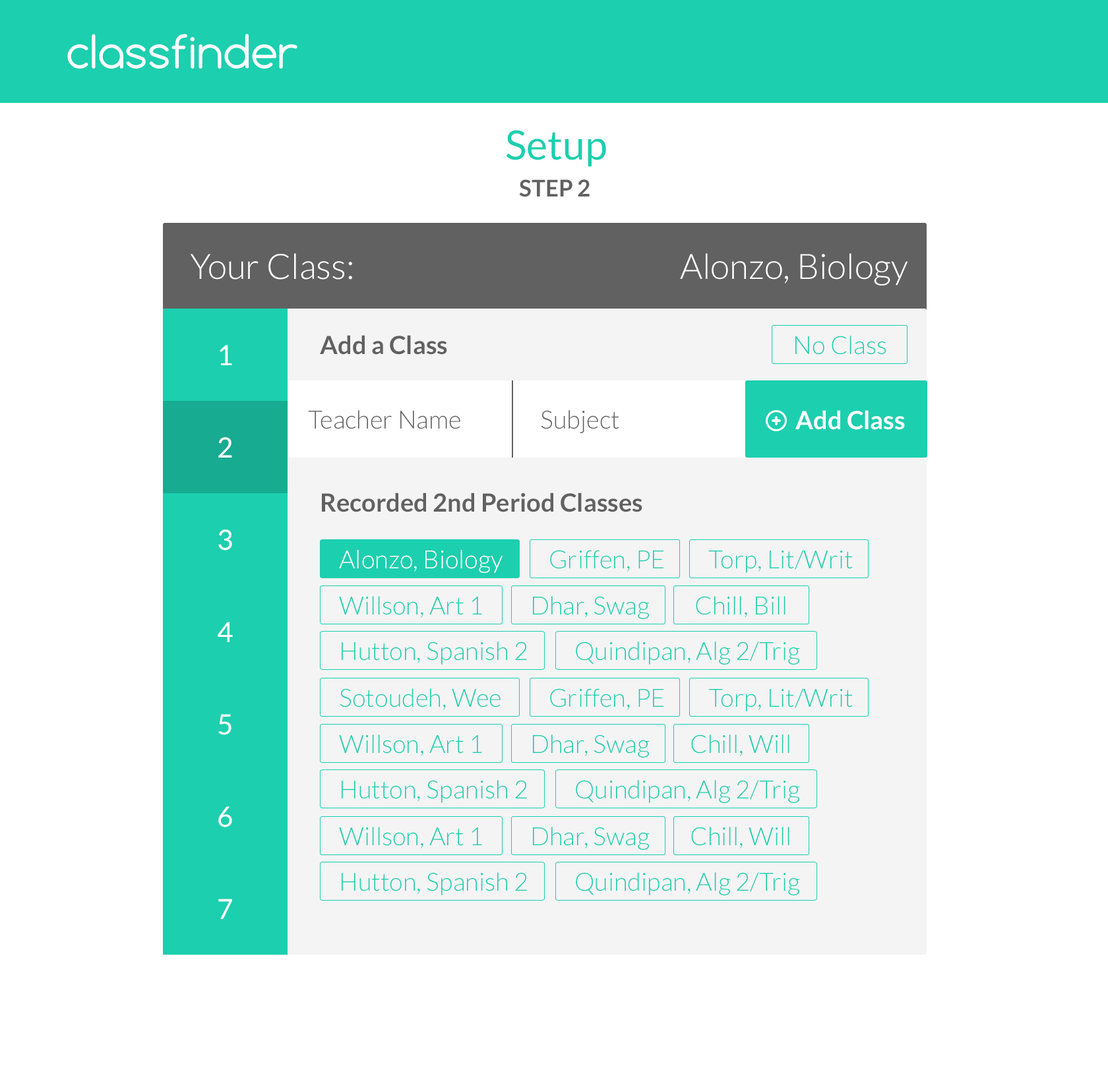
<style>
.page{position:relative;width:1108px;height:1076px;background:#ffffff}
.page>*{position:absolute;margin:0}
.t1{font:40.2px "Lato-Regular";color:#1ccfaf}
.t2{font:23.1px "Lato-Bold";color:#616161}
.t3{font:35px "Lato-Light";color:#ffffff}
.t4{font:25.1px "Lato-Bold";color:#616161}
.t5{font:25.1px "Lato-Light";color:#1ccfaf}
.t6{font:27.7px "Lato-Regular";color:#ffffff}
.t7{font:25.1px "Lato-Light";color:#616161}
.t8{font:25.1px "Lato-Bold";color:#ffffff}
.t9{font:25.1px "Lato-Light";color:#ffffff}
</style>
<div class="page">
<p class="t1" style="left:506px;top:130px;width:100px;height:37px">Setup</p>
<p class="t2" style="left:519px;top:179px;width:71px;height:18px">STEP 2</p>
<p class="t3" style="left:191px;top:253px;width:161px;height:27px">Your Class:</p>
<p class="t3" style="left:680px;top:253px;width:228px;height:33px">Alonzo, Biology</p>
<p class="t4" style="left:320px;top:335px;width:127px;height:20px">Add a Class</p>
<p class="t5" style="left:795px;top:336px;width:91px;height:19px">No Class</p>
<p class="t6" style="left:220px;top:345px;width:12px;height:20px">1</p>
<p class="t7" style="left:308px;top:410px;width:152px;height:19px">Teacher Name</p>
<p class="t7" style="left:541px;top:410px;width:78px;height:23px">Subject</p>
<p class="t8" style="left:795px;top:410px;width:110px;height:20px">Add Class</p>
<p class="t6" style="left:218px;top:437px;width:14px;height:21px">2</p>
<p class="t4" style="left:322px;top:493px;width:320px;height:19px">Recorded 2nd Period Classes</p>
<p class="t6" style="left:218px;top:530px;width:14px;height:21px">3</p>
<p class="t9" style="left:339px;top:550px;width:164px;height:23px">Alonzo, Biology</p>
<p class="t5" style="left:550px;top:550px;width:113px;height:22px">Griffen, PE</p>
<p class="t5" style="left:708px;top:550px;width:145px;height:23px">Torp, Lit/Writ</p>
<p class="t5" style="left:339px;top:596px;width:143px;height:22px">Willson, Art 1</p>
<p class="t5" style="left:533px;top:596px;width:117px;height:23px">Dhar, Swag</p>
<p class="t5" style="left:696px;top:596px;width:89px;height:22px">Chill, Bill</p>
<p class="t6" style="left:217px;top:622px;width:16px;height:20px">4</p>
<p class="t5" style="left:342px;top:642px;width:185px;height:23px">Hutton, Spanish 2</p>
<p class="t5" style="left:576px;top:642px;width:224px;height:23px">Quindipan, Alg 2/Trig</p>
<p class="t5" style="left:340px;top:688px;width:161px;height:22px">Sotoudeh, Wee</p>
<p class="t5" style="left:550px;top:688px;width:113px;height:22px">Griffen, PE</p>
<p class="t5" style="left:708px;top:688px;width:145px;height:24px">Torp, Lit/Writ</p>
<p class="t6" style="left:218px;top:714px;width:13px;height:21px">5</p>
<p class="t5" style="left:339px;top:735px;width:143px;height:21px">Willson, Art 1</p>
<p class="t5" style="left:533px;top:735px;width:117px;height:23px">Dhar, Swag</p>
<p class="t5" style="left:691px;top:735px;width:98px;height:21px">Chill, Will</p>
<p class="t5" style="left:342px;top:780px;width:185px;height:23px">Hutton, Spanish 2</p>
<p class="t5" style="left:576px;top:780px;width:224px;height:23px">Quindipan, Alg 2/Trig</p>
<p class="t6" style="left:218px;top:807px;width:14px;height:21px">6</p>
<p class="t5" style="left:339px;top:827px;width:143px;height:22px">Willson, Art 1</p>
<p class="t5" style="left:533px;top:827px;width:117px;height:23px">Dhar, Swag</p>
<p class="t5" style="left:691px;top:827px;width:98px;height:22px">Chill, Will</p>
<p class="t5" style="left:342px;top:872px;width:185px;height:24px">Hutton, Spanish 2</p>
<p class="t5" style="left:576px;top:872px;width:224px;height:24px">Quindipan, Alg 2/Trig</p>
<p class="t6" style="left:218px;top:899px;width:14px;height:20px">7</p>
</div>
